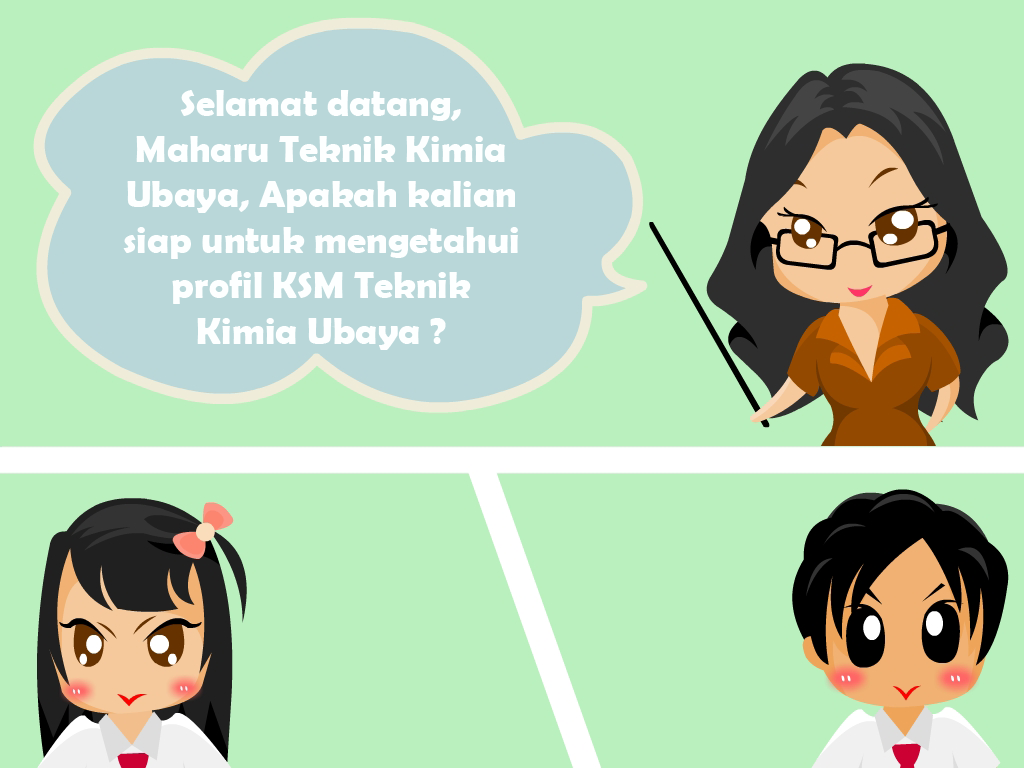
<style>
.page{position:relative;width:1024px;height:768px;background:#baf0be}
.page>*{position:absolute;margin:0}
.t1{font:38px "BerlinSansFBDemi-Bold";color:#fdffff}
</style>
<div class="page">
<p class="t1" style="left:123px;top:90px;width:395px;height:260px;text-align:center">Selamat datang,<br>Maharu Teknik Kimia<br>Ubaya, Apakah kalian<br>siap untuk mengetahui<br>profil KSM Teknik<br>Kimia Ubaya ?</p>
</div>
